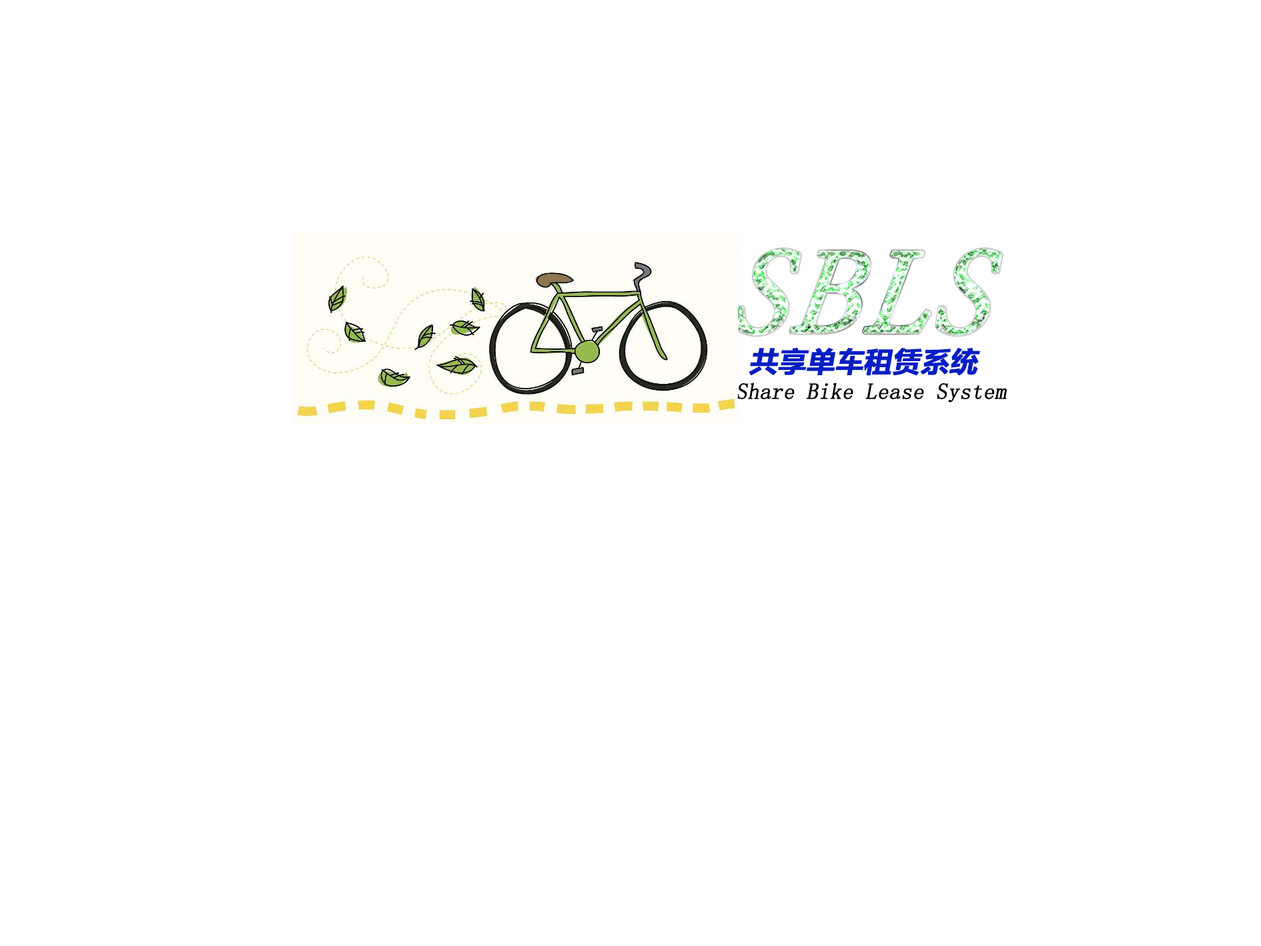
<style>
.page{position:relative;width:1261px;height:946px;background:#ffffff}
.page>*{position:absolute;margin:0}
.t1{font:133.5px "AdobeDevanagari-Italic";font-weight:bold;font-style:italic}
.t2{font:27.8px "MicrosoftYaHeiUI-Bold";color:#051fc3;font-weight:bold;font-style:italic}
.t3{font:22.2px "SimSun";color:#000000;font-weight:bold;font-style:italic}
</style>
<div class="page">
<p class="t1" style="left:734px;top:248px;width:269px;height:88px">SBLS</p>
<p class="t2" style="left:749px;top:348px;width:231px;height:28px">共享单车租赁系统</p>
<p class="t3" style="left:737px;top:382px;width:270px;height:20px">Share Bike Lease System</p>
</div>
